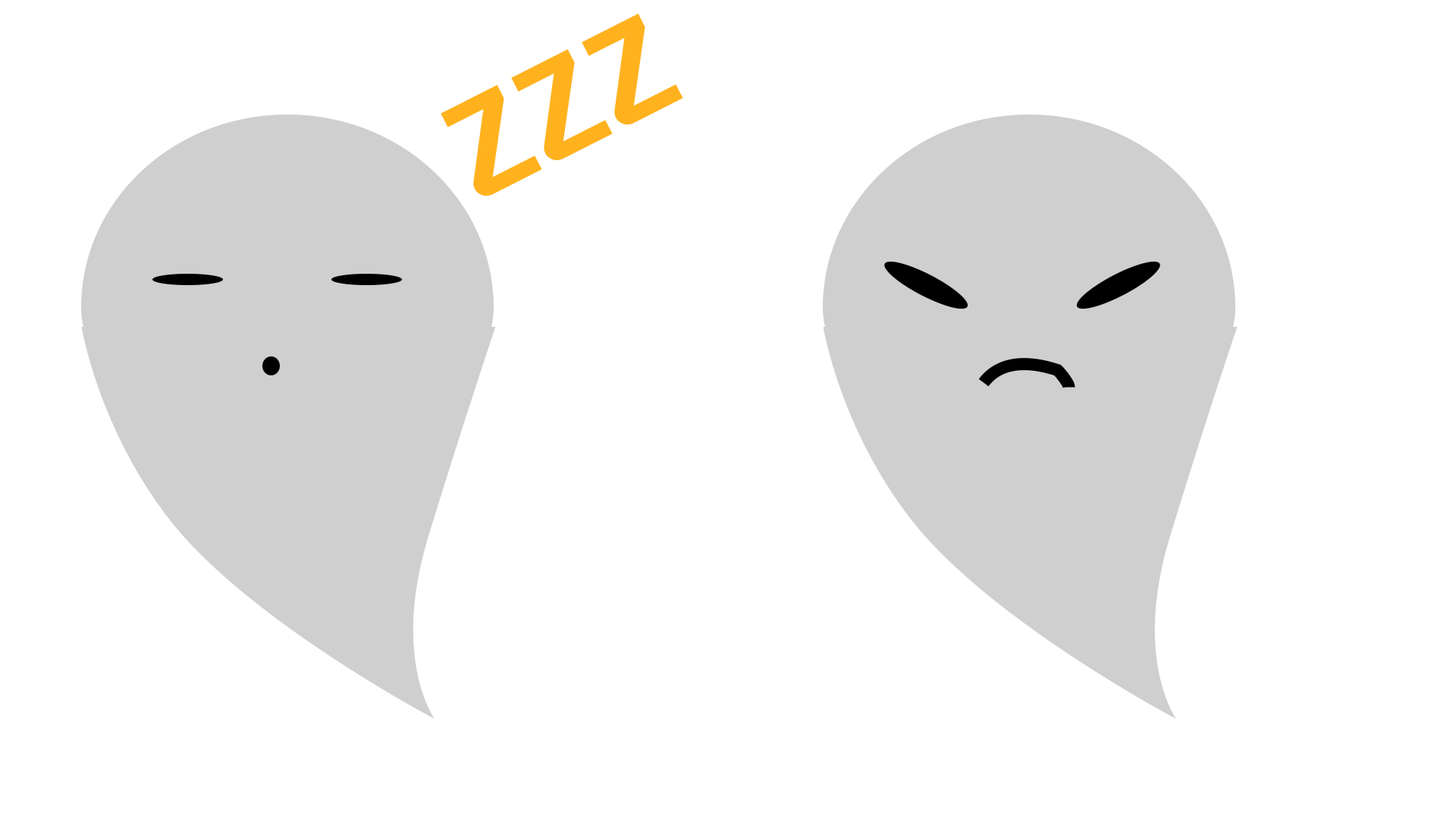
<style>
.page{position:relative;width:1456px;height:819px;background:#ffffff}
.page>*{position:absolute;margin:0}
.t1{font:109.2px "HeadlineR-HM";color:#ffb21e}
</style>
<div class="page">
<p class="t1" style="left:441px;top:14px;width:242px;height:182px;rotate:-27deg">ZZZ</p>
</div>
